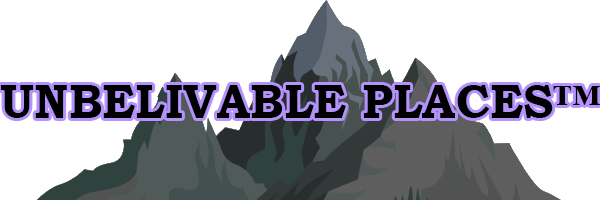
<style>
.page{position:relative;width:600px;height:200px;background:#ffffff}
.page>*{position:absolute;margin:0}
.t1{font:48.2px "BookmanOldStyle-Bold";color:#000000;scale:0.96 1}
</style>
<div class="page">
<p class="t1" style="left:0px;top:85px;width:600px;height:33px">UNBELIVABLE PLACES™</p>
</div>
